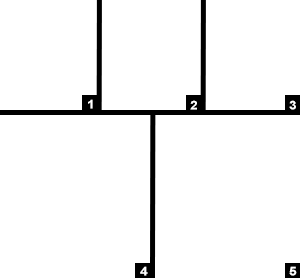
<style>
.page{position:relative;width:300px;height:278px;background:#ffffff}
.page>*{position:absolute;margin:0}
.t1{font:12.2px "Arial-BoldMT";letter-spacing:0.1em;color:#ffffff;scale:1.13 1}
</style>
<div class="page">
<p class="t1" style="left:88px;top:99px;width:5px;height:10px">1</p>
<p class="t1" style="left:190px;top:100px;width:7px;height:10px">2</p>
<p class="t1" style="left:289px;top:100px;width:7px;height:10px">3</p>
<p class="t1" style="left:140px;top:266px;width:8px;height:10px">4</p>
<p class="t1" style="left:289px;top:266px;width:8px;height:10px">5</p>
</div>
